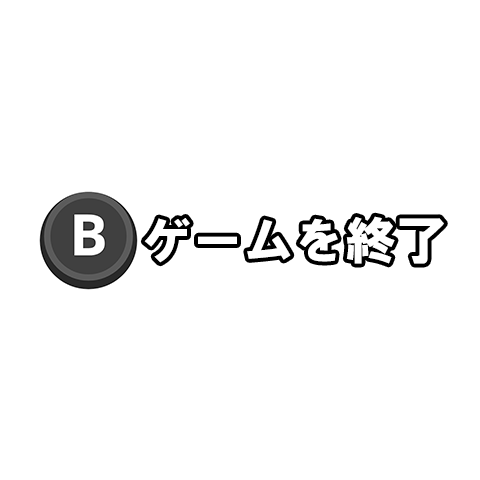
<style>
.page{position:relative;width:480px;height:480px;background:#ffffff}
.page>*{position:absolute;margin:0}
.t1{font:51px "HGSSoeiKakugothicUB";color:#ffffff}
</style>
<div class="page">
<p class="t1" style="left:144px;top:216px;width:300px;height:48px">ゲームを終了</p>
</div>
